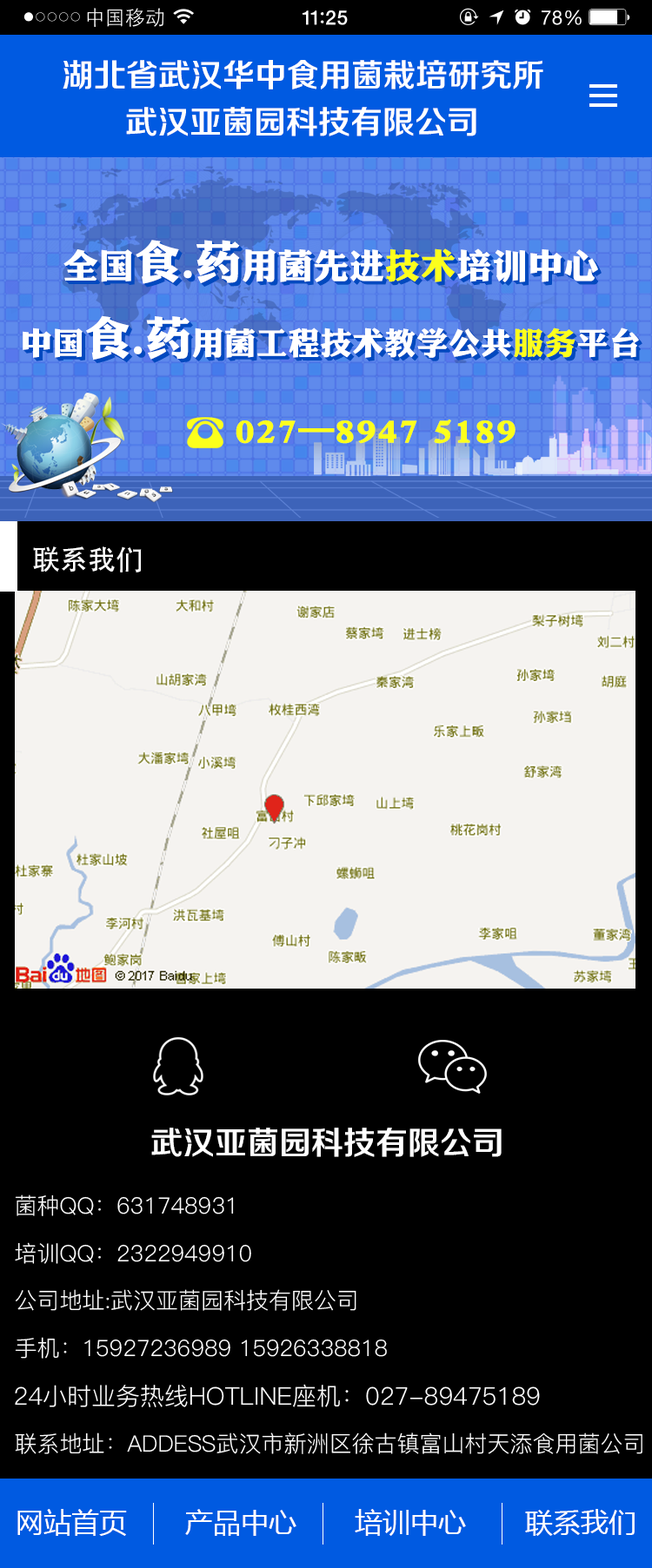
<style>
.page{position:relative;width:652px;height:1568px;background:#000000}
.page>*{position:absolute;margin:0}
.t1{font:32.1px "FZZZHONGJW--GB1-0";color:#ffffff}
.t2{font:27.8px "AdobeHeitiStd-Regular";color:#ffffff}
.t3{font:22.6px "PingFang-SC-Regular";color:#ffffff}
.t4{font:24.3px "PingFang-SC-Regular";color:#ffffff}
.t5{font:27.8px "MicrosoftYaHei";color:#ffffff}
</style>
<div class="page">
<p class="t1" style="left:63px;top:60px;width:480px;height:29px">湖北省武汉华中食用菌栽培研究所</p>
<p class="t1" style="left:126px;top:107px;width:350px;height:29px">武汉亚菌园科技有限公司</p>
<p class="t2" style="left:33px;top:546px;width:109px;height:26px">联系我们</p>
<p class="t1" style="left:151px;top:1128px;width:350px;height:29px">武汉亚菌园科技有限公司</p>
<p class="t3" style="left:15px;top:1194px;width:219px;height:22px">菌种QQ：631748931</p>
<p class="t3" style="left:15px;top:1242px;width:236px;height:22px">培训QQ：2322949910</p>
<p class="t3" style="left:15px;top:1289px;width:341px;height:22px">公司地址:武汉亚菌园科技有限公司</p>
<p class="t3" style="left:15px;top:1337px;width:372px;height:22px">手机：15927236989 15926338818</p>
<p class="t4" style="left:15px;top:1384px;width:524px;height:23px">24小时业务热线HOTLINE座机：027-89475189</p>
<p class="t3" style="left:15px;top:1432px;width:627px;height:22px">联系地址：ADDESS武汉市新洲区徐古镇富山村天添食用菌公司</p>
<p class="t5" style="left:17px;top:1509px;width:110px;height:27px">网站首页</p>
<p class="t5" style="left:185px;top:1509px;width:111px;height:27px">产品中心</p>
<p class="t5" style="left:354px;top:1509px;width:112px;height:27px">培训中心</p>
<p class="t5" style="left:525px;top:1509px;width:109px;height:27px">联系我们</p>
</div>
